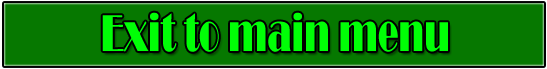
<style>
.page{position:relative;width:547px;height:69px;background:#067800}
.page>*{position:absolute;margin:0}
.t1{font:53.9px "Broadway";color:#00ff06;scale:0.63 1}
</style>
<div class="page">
<p class="t1" style="left:102px;top:12px;width:346px;height:40px">Exit to main menu</p>
</div>
